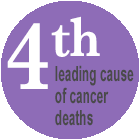
<style>
.page{position:relative;width:140px;height:140px;background:#8e6cb7}
.page>*{position:absolute;margin:0}
.t1{font:100px "Baskerville-SemiBold";color:#ffffff;scale:0.9 1}
.t2{font:36px/22px "ArialNarrow-Bold";color:#4a4a4a;scale:0.69 1}
</style>
<div class="page">
<p class="t1" style="left:7px;top:16px;width:93px;height:73px">4th</p>
<p class="t2" style="left:55px;top:65px;width:79px;height:61px">leading cause<br>of cancer <br>deaths</p>
</div>
